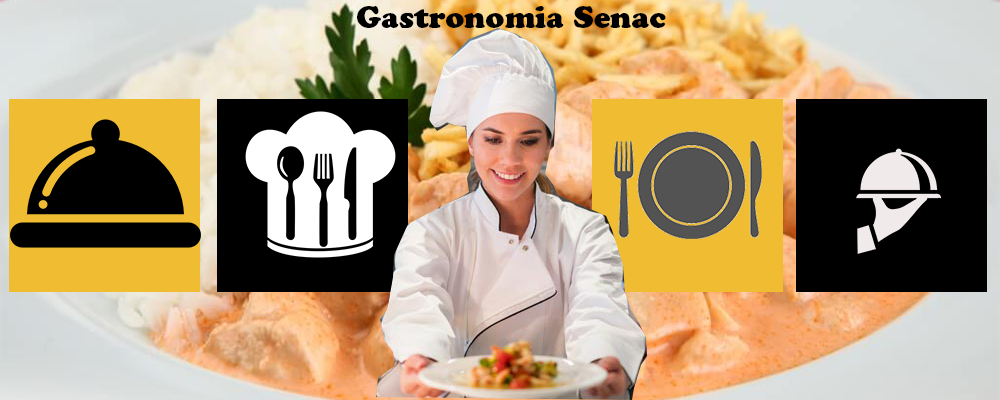
<style>
.page{position:relative;width:1000px;height:400px}
.page>*{position:absolute;margin:0}
.t1{font:30px "CooperBlackStd";color:#000000}
</style>
<div class="page">
<p class="t1" style="left:357px;top:6px;width:309px;height:23px">Gastronomia Senac</p>
</div>
